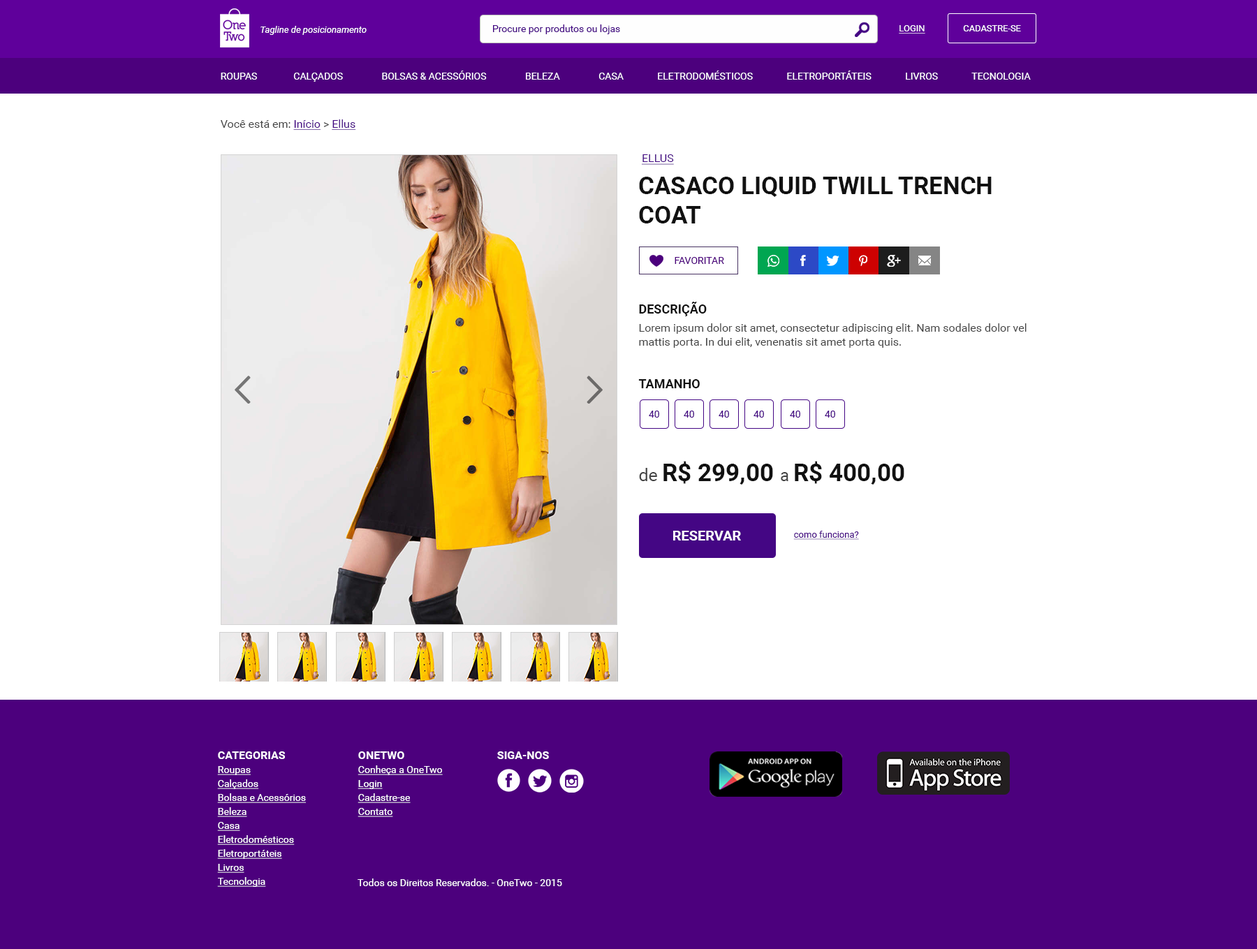
<style>
.page{position:relative;width:1257px;height:949px;background:#ffffff}
.page>*{position:absolute;margin:0}
.t1{font:9.1px "Roboto-Italic";color:#ffffff}
.t2{font:9.8px "Roboto-Regular";color:#440684}
.t3{font:9.1px "Roboto-Regular";color:#ffffff;text-decoration:underline}
.t4{font:9.1px "Roboto-Regular";color:#ffffff}
.t5{font:9.8px "Roboto-Regular";color:#ffffff}
.t6{font:11.2px "Roboto-Regular";color:#444444}
.t7{font:11.2px "Roboto-Regular";color:#440684;text-decoration:underline}
.t8{font:24.4px "Roboto-Bold";color:#111111}
.t9{font:9.8px "Roboto-Regular";color:#4c007d}
.t10{font:11.2px/18.2px "Roboto-Regular";color:#444444}
.t11{font:12.6px/14px "Roboto-Bold";color:#111111}
.t12{font:11.2px/14px "Roboto-Regular";color:#444444}
.t13{font:12.6px "Roboto-Bold";color:#111111}
.t14{font:9.1px "Roboto-Regular";color:#444444}
.t15{font:17.5px "Roboto-Regular";color:#444444}
.t16{font:16.8px "Roboto-Regular";color:#444444}
.t17{font:14px "Roboto-Bold";color:#ffffff}
.t18{font:9.1px "Roboto-Regular";color:#440684;text-decoration:underline}
.t19{font:9.8px/14px "Roboto-Regular";color:#ffffff;text-decoration:underline}
.t20{font:11.2px/14px "Roboto-Bold";color:#ffffff}
.t21{font:11.2px "Roboto-Bold";color:#ffffff}
</style>
<div class="page">
<p class="t1" style="left:260px;top:26px;width:107px;height:9px">Tagline de posicionamento</p>
<p class="t2" style="left:493px;top:24px;width:127px;height:10px">Procure por produtos ou lojas</p>
<p class="t3" style="left:899px;top:25px;width:26px;height:9px">LOGIN</p>
<p class="t4" style="left:963px;top:25px;width:58px;height:6px">CADASTRE-SE</p>
<p class="t5" style="left:221px;top:71px;width:810px;height:11px">ROUPAS               CALÇADOS                BOLSAS &amp; ACESSÓRIOS                BELEZA                CASA              ELETRODOMÉSTICOS              ELETROPORTÁTEIS              LIVROS              TECNOLOGIA</p>
<p class="t6" style="left:221px;top:119px;width:135px;height:11px">Você está em: <span class="t7">Início </span>&gt; <span class="t7">Ellus</span></p>
<p class="t7" style="left:641px;top:154px;width:33px;height:11px">ELLUS</p>
<p class="t8" style="left:639px;top:177px;width:352px;height:46px">CASACO LIQUID TWILL TRENCH COAT</p>
<p class="t9" style="left:674px;top:257px;width:50px;height:7px">FAVORITAR</p>
<p class="t10" style="left:639px;top:302px;width:387px;height:46px"><span class="t11">DESCRIÇÃO<br></span>Lorem ipsum dolor sit amet, consectetur adipiscing elit. Nam sodales <span class="t12">dolor vel mattis porta. In dui elit, venenatis sit amet porta quis.</span></p>
<p class="t13" style="left:638px;top:379px;width:62px;height:9px">TAMANHO</p>
<p class="t2" style="left:649px;top:411px;width:10px;height:7px">40</p>
<p class="t2" style="left:684px;top:411px;width:10px;height:7px">40</p>
<p class="t2" style="left:718px;top:411px;width:11px;height:7px">40</p>
<p class="t2" style="left:753px;top:411px;width:11px;height:7px">40</p>
<p class="t2" style="left:790px;top:411px;width:10px;height:7px">40</p>
<p class="t2" style="left:825px;top:411px;width:10px;height:7px">40</p>
<p class="t8" style="left:639px;top:461px;width:265px;height:24px"><span class="t14"><br></span><span class="t15">de </span>R$ 299,00 <span class="t16">a </span>R$ 400,00</p>
<p class="t17" style="left:673px;top:531px;width:68px;height:9px">RESERVAR</p>
<p class="t18" style="left:793px;top:531px;width:66px;height:9px">como funciona?</p>
<p class="t19" style="left:217px;top:751px;width:89px;height:136px"><span class="t20">CATEGORIAS</span><br>Roupas<br>Calçados<br>Bolsas e Acessórios<br>Beleza<br>Casa<br>Eletrodomésticos<br>Eletroportáteis<br>Livros<br>Tecnologia</p>
<p class="t19" style="left:357px;top:751px;width:86px;height:66px"><span class="t20">ONETWO<br></span>Conheça a OneTwo<br>Login<br>Cadastre-se<br>Contato</p>
<p class="t21" style="left:497px;top:751px;width:52px;height:8px">SIGA-NOS</p>
<p class="t5" style="left:357px;top:878px;width:205px;height:8px">Todos os Direitos Reservados. - OneTwo - 2015</p>
</div>
